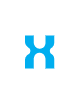
<style>
.page{position:relative;width:80px;height:90px;background:#ffffff}
.page>*{position:absolute;margin:0}
.t1{font:80px "Bauhaus93";letter-spacing:0.2em}
</style>
<div class="page">
<p class="t1" style="left:22px;top:32px;width:36px;height:40px">x</p>
</div>
